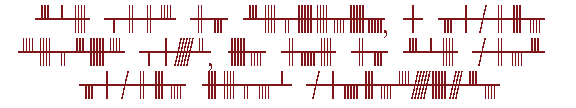
<style>
.page{position:relative;width:576px;height:108px;background:#ffffff}
.page>*{position:absolute;margin:0}
.t1{font:27.6px "Beth-Luis-Fearn-Regular";letter-spacing:-0.1em;color:#7e1619;scale:0.71 1}
.t2{font:27.6px "Baskerville";letter-spacing:-0.1em;color:#7e1619;scale:0.71 1}
</style>
<div class="page">
<p class="t1" style="left:18px;top:5px;width:527px;height:94px;text-align:center">the booc of teliesin<span class="t2">,</span> a famous<br>celtic bard<span class="t2">,</span> is one of the most <br>famous uelsh manuscripts</p>
</div>
